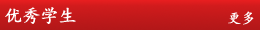
<style>
.page{position:relative;width:260px;height:30px}
.page>*{position:absolute;margin:0}
.t1{font:18px "¿¬Ìå";color:#ffffff;font-weight:bold}
.t2{font:14px "¿¬Ìå";color:#ffffff;font-weight:bold}
</style>
<div class="page">
<p class="t1" style="left:5px;top:7px;width:71px;height:17px">优秀学生</p>
<p class="t2" style="left:228px;top:11px;width:26px;height:14px">更多</p>
</div>
